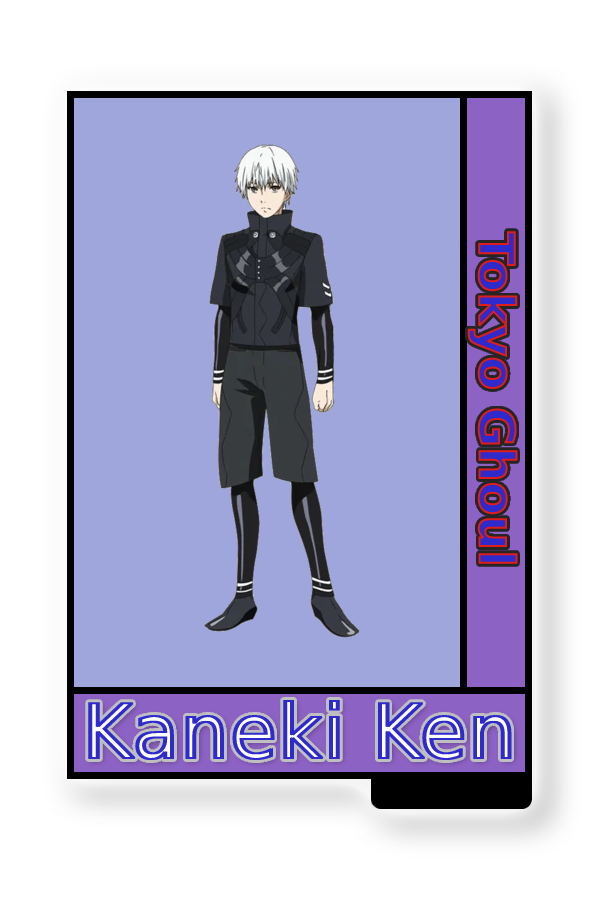
<style>
.page{position:relative;width:600px;height:900px;background:#9ea6db}
.page>*{position:absolute;margin:0}
.t1{font:48.8px "MADETOMMY-Bold"}
.t2{font:75px "CoolveticaRg-Regular";font-weight:bold}
</style>
<div class="page">
<p class="t1" style="left:467px;top:231px;width:51px;height:333px;rotate:90deg">Tokyo Ghoul</p>
<p class="t2" style="left:88px;top:700px;width:424px;height:61px">Kaneki Ken</p>
</div>
